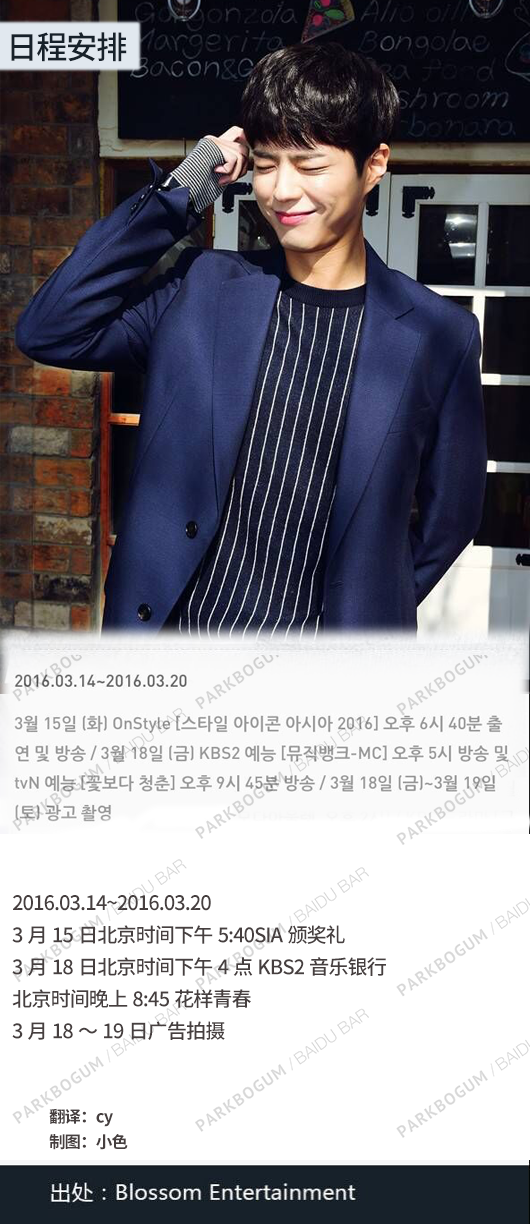
<style>
.page{position:relative;width:530px;height:1224px;background:#ffffff}
.page>*{position:absolute;margin:0}
.t1{font:31.6px "SourceHanSansCN-Medium";letter-spacing:-0.05em;color:#17212a}
.t2{font:20.1px/32.1px "SourceHanSansCN-Medium";letter-spacing:-0.05em;color:#463f3f}
.t3{font:16.4px/25.2px "SourceHanSansCN-Bold";letter-spacing:-0.05em;color:#463f3f}
</style>
<div class="page">
<p class="t1" style="left:11px;top:32px;width:116px;height:30px">日程安排</p>
<p class="t2" style="left:12px;top:895px;width:374px;height:145px">2016.03.14~2016.03.20<br>3月15日北京时间下午5:40SIA颁奖礼<br>3月18日北京时间下午4点KBS2音乐银行<br>北京时间晚上8:45花样青春<br>3月18～19日广告拍摄</p>
<p class="t3" style="left:49px;top:1108px;width:79px;height:42px">翻译：cy<br>制图：小色</p>
</div>
